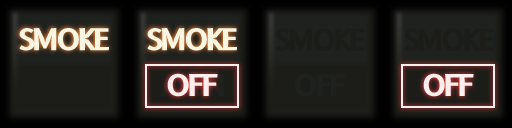
<style>
.page{position:relative;width:512px;height:128px}
.page>*{position:absolute;margin:0}
.t1{font:29.2px "B612-Bold";letter-spacing:-0.075em;color:#1c1d19}
.t2{font:29.2px "B612-Bold";letter-spacing:-0.075em;color:#1f211e}
.t3{font:29.2px "B612-Bold";letter-spacing:-0.075em;color:#ffeeee}
</style>
<div class="page">
<p class="t1" style="left:275px;top:28px;width:90px;height:23px">SMOKE</p>
<p class="t1" style="left:404px;top:28px;width:90px;height:23px">SMOKE</p>
<p class="t2" style="left:295px;top:74px;width:51px;height:23px">OFF</p>
<p class="t3" style="left:423px;top:74px;width:51px;height:23px">OFF</p>
</div>
